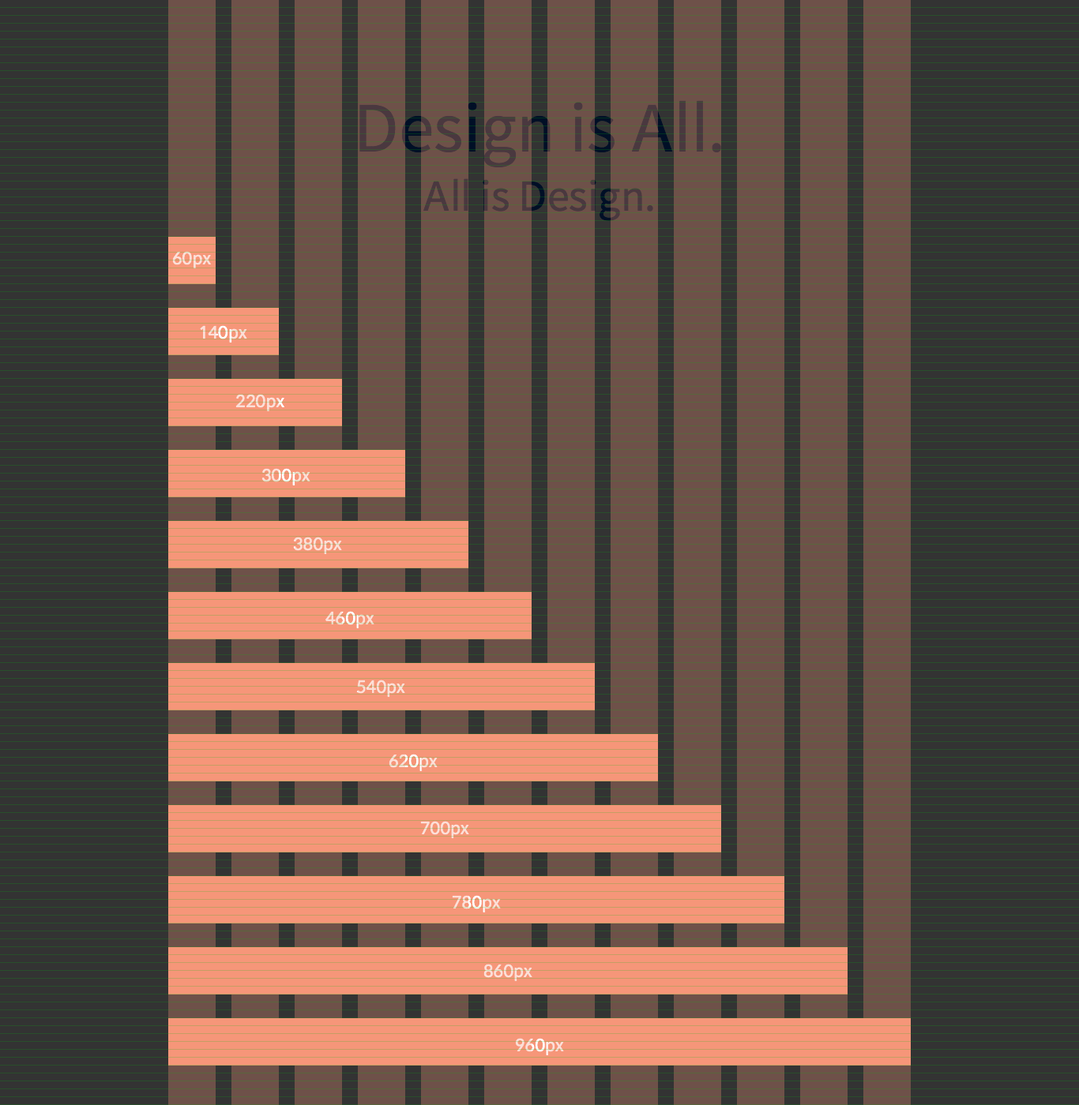
<style>
.page{position:relative;width:1079px;height:1105px}
.page>*{position:absolute;margin:0}
.t1{font:63.2px "SpoqaHanSans-Regular";color:#4a383f}
.t2{font:39.5px "SpoqaHanSans-Regular";color:#4a383f}
.t3{font:16.6px "SpoqaHanSans-Regular";color:#fcdfd7}
.t4{font:16.6px "SpoqaHanSans-Regular"}
</style>
<div class="page">
<p class="t1" style="left:359px;top:100px;width:362px;height:121px;text-align:center">Design is All.<br><span class="t2">All is Design.</span></p>
<p class="t3" style="left:172px;top:251px;width:39px;height:17px">60px</p>
<p class="t4" style="left:200px;top:325px;width:47px;height:18px">140px</p>
<p class="t3" style="left:235px;top:394px;width:49px;height:17px">220px</p>
<p class="t4" style="left:261px;top:468px;width:49px;height:18px">300px</p>
<p class="t3" style="left:293px;top:537px;width:49px;height:17px">380px</p>
<p class="t4" style="left:325px;top:611px;width:49px;height:18px">460px</p>
<p class="t3" style="left:356px;top:680px;width:49px;height:17px">540px</p>
<p class="t4" style="left:389px;top:754px;width:48px;height:17px">620px</p>
<p class="t3" style="left:420px;top:821px;width:49px;height:18px">700px</p>
<p class="t4" style="left:452px;top:895px;width:49px;height:18px">780px</p>
<p class="t3" style="left:483px;top:964px;width:49px;height:18px">860px</p>
<p class="t4" style="left:515px;top:1038px;width:49px;height:18px">960px</p>
</div>
